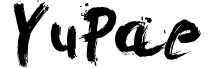
<style>
.page{position:relative;width:210px;height:68px;background:#ffffff}
.page>*{position:absolute;margin:0}
.t1{font:70.1px "LeviBrush";color:#000000}
</style>
<div class="page">
<p class="t1" style="left:13px;top:0px;width:188px;height:68px">YuPae</p>
</div>
